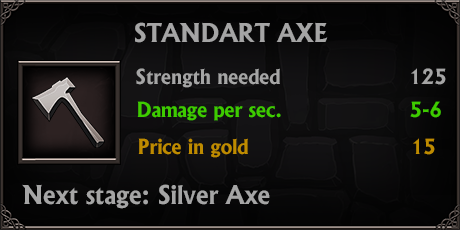
<style>
.page{position:relative;width:460px;height:230px}
.page>*{position:absolute;margin:0}
.t1{font:24.9px "AlbertusBold-Regular";color:#a5a5a5}
.t2{font:20px "AlbertusBold-Regular";color:#a5a5a5}
.t3{font:20px "AlbertusBold-Regular";color:#3ecb00}
.t4{font:20px "AlbertusBold-Regular";color:#be8b00}
.t5{font:25px "AlbertusBold-Regular";color:#a5a5a5}
</style>
<div class="page">
<p class="t1" style="left:135px;top:22px;width:193px;height:21px">STANDART AXE</p>
<p class="t2" style="left:136px;top:68px;width:310px;height:20px">Strength needed   125</p>
<p class="t3" style="left:137px;top:101px;width:304px;height:20px">Damage per sec.   5-6</p>
<p class="t4" style="left:138px;top:138px;width:297px;height:20px">Price in gold    15</p>
<p class="t5" style="left:22px;top:184px;width:248px;height:25px">Next stage: Silver Axe</p>
</div>
